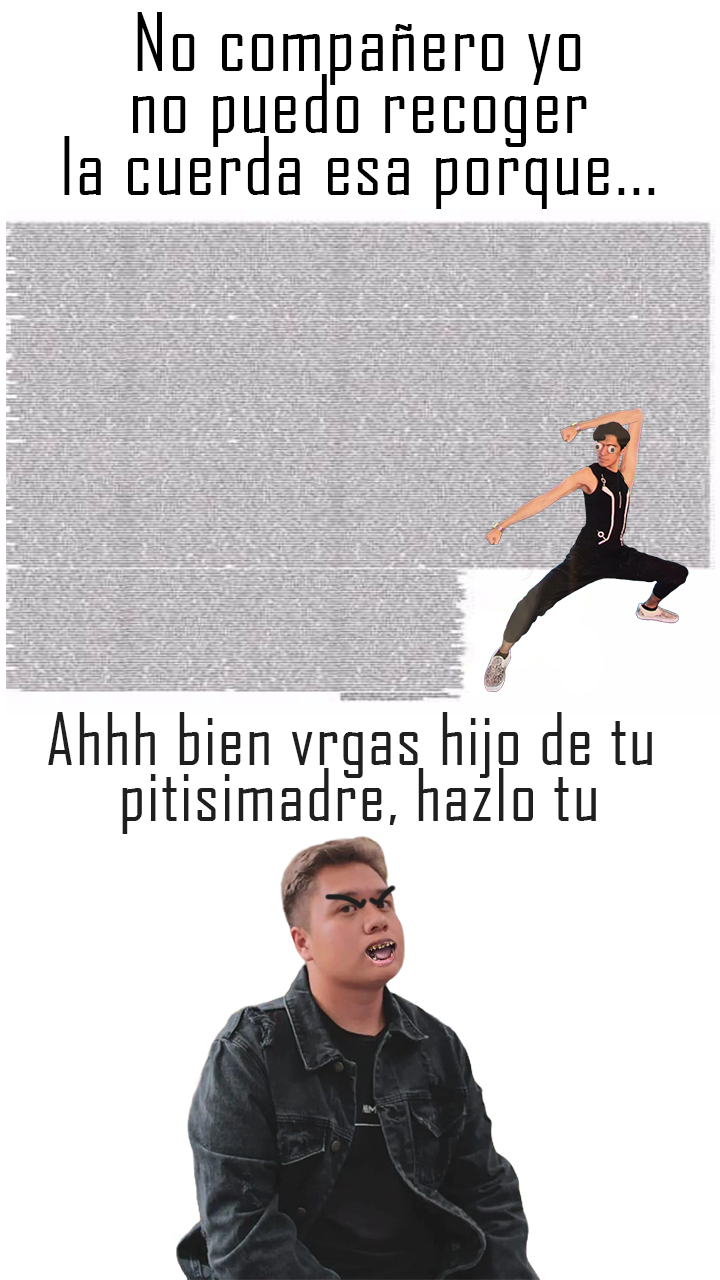
<style>
.page{position:relative;width:720px;height:1280px;background:#ffffff}
.page>*{position:absolute;margin:0}
.t1{font:77.4px/61.9px "AgencyFB-Reg";letter-spacing:0.025em;color:#000000}
.t2{font:69.8px/55.9px "AgencyFB-Reg";letter-spacing:0.025em;color:#1f1f1f}
</style>
<div class="page">
<p class="t1" style="left:64px;top:12px;width:591px;height:197px;text-align:center">No compañero yo<br>no puedo recoger<br>la cuerda esa porque...</p>
<p class="t2" style="left:48px;top:712px;width:604px;height:122px;text-align:center">Ahhh bien vrgas hijo de tu <br>pitisimadre, hazlo tu</p>
</div>
